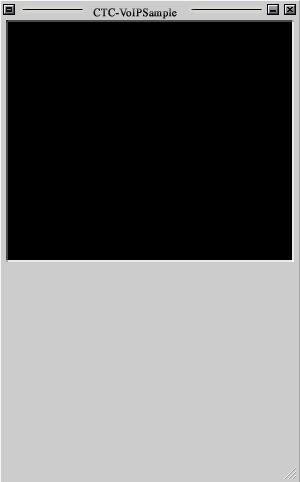
<style>
.page{position:relative;width:300px;height:482px;background:#cccccc}
.page>*{position:absolute;margin:0}
.t1{font:11px "TimesNewRomanPSMT";color:#000000;font-weight:bold}
</style>
<div class="page">
<p class="t1" style="left:93px;top:8px;width:84px;height:11px">CTC-VoIPSample</p>
</div>
